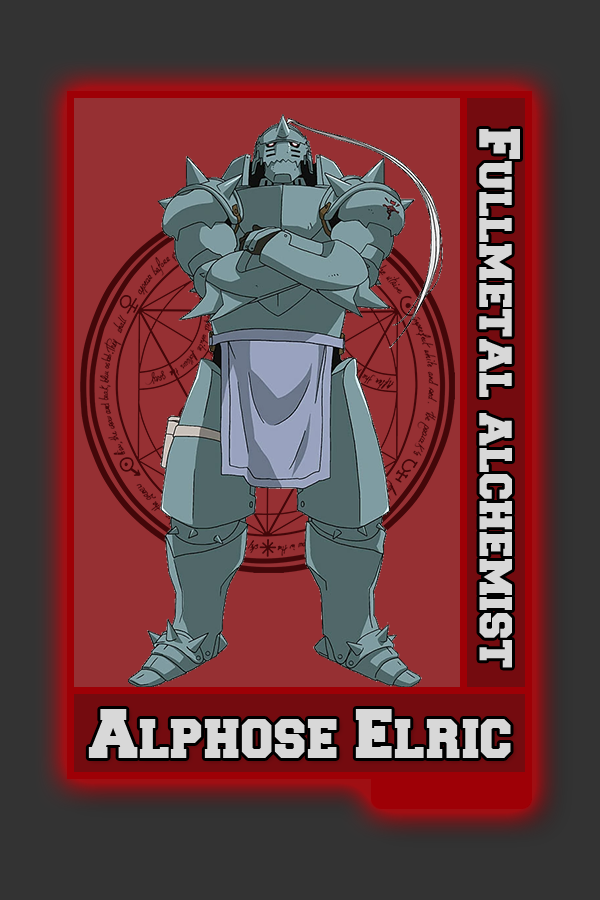
<style>
.page{position:relative;width:600px;height:900px;background:#333333}
.page>*{position:absolute;margin:0}
.t1{font:48.8px "Freshman";color:#d8d8d8}
.t2{font:58.3px "Freshman";color:#d8d8d8}
</style>
<div class="page">
<p class="t1" style="left:479px;top:129px;width:41px;height:539px;rotate:90deg">Fullmetal alchemist</p>
<p class="t2" style="left:88px;top:709px;width:423px;height:49px">Alphose Elric</p>
</div>
